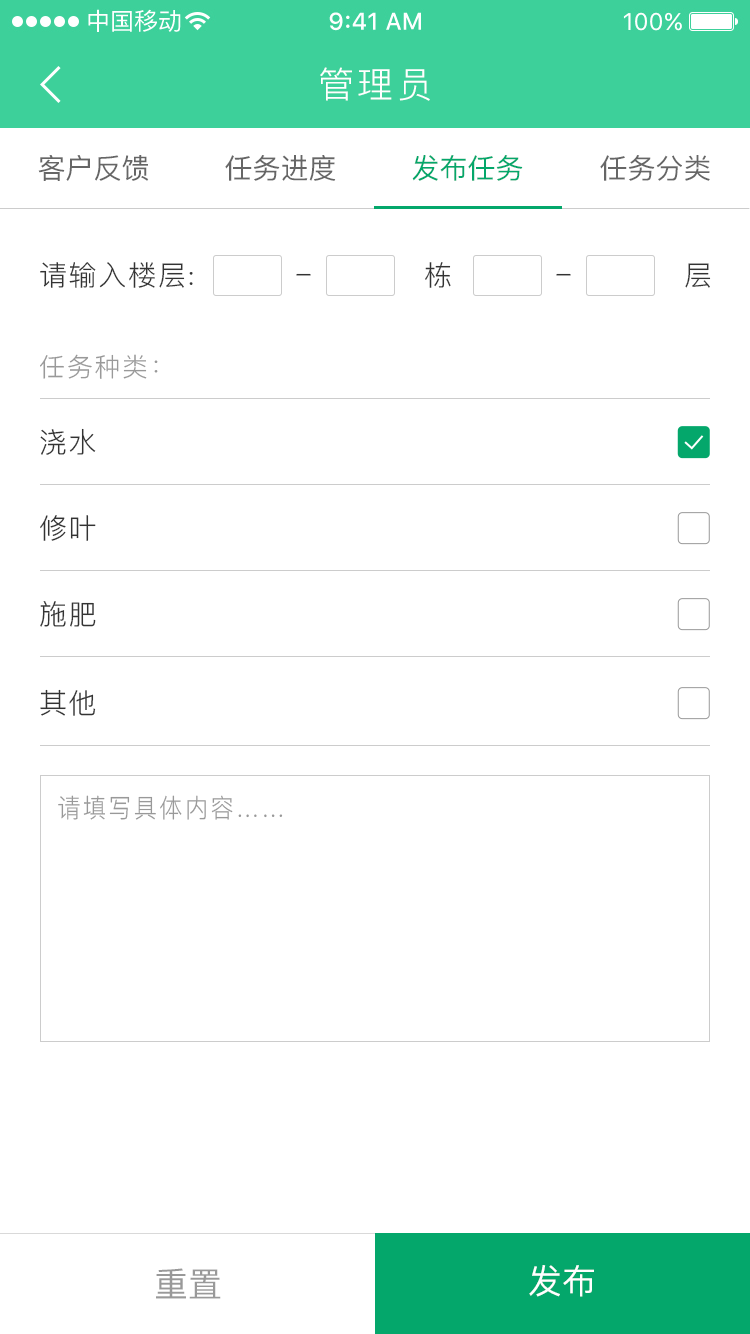
<style>
.page{position:relative;width:750px;height:1334px;background:#ffffff}
.page>*{position:absolute;margin:0}
.t1{font:36px "PingFang-SC-Regular";letter-spacing:0.1em;color:#ffffff}
.t2{font:28px "PingFang-SC-Medium";color:#666666}
.t3{font:28px "PingFang-SC-Medium";color:#04a76b}
.t4{font:28px "PingFang-SC-Regular";letter-spacing:0.06em;color:#333333}
.t5{font:26px "PingFang-SC-Regular";letter-spacing:0.06em;color:#999999}
.t6{font:26px "PingFang-SC-Regular";letter-spacing:0.1em;color:#999999;scale:0.89 1}
.t7{font:34px "PingFang-SC-Medium";color:#ffffff}
.t8{font:34px "PingFang-SC-Medium";color:#999999}
</style>
<div class="page">
<p class="t1" style="left:320px;top:67px;width:110px;height:34px">管理员</p>
<p class="t2" style="left:38px;top:155px;width:111px;height:26px">客户反馈</p>
<p class="t2" style="left:225px;top:155px;width:111px;height:26px">任务进度</p>
<p class="t3" style="left:412px;top:155px;width:111px;height:26px">发布任务</p>
<p class="t2" style="left:600px;top:155px;width:110px;height:26px">任务分类</p>
<p class="t4" style="left:40px;top:262px;width:153px;height:26px">请输入楼层:</p>
<p class="t4" style="left:425px;top:262px;width:26px;height:26px">栋</p>
<p class="t4" style="left:685px;top:263px;width:26px;height:25px">层</p>
<p class="t4" style="left:296px;top:273px;width:15px;height:3px">-</p>
<p class="t4" style="left:556px;top:273px;width:15px;height:3px">-</p>
<p class="t5" style="left:40px;top:354px;width:118px;height:25px">任务种类：</p>
<p class="t4" style="left:40px;top:428px;width:56px;height:27px">浇水</p>
<p class="t4" style="left:40px;top:515px;width:56px;height:26px">修叶</p>
<p class="t4" style="left:40px;top:601px;width:56px;height:26px">施肥</p>
<p class="t4" style="left:40px;top:689px;width:56px;height:27px">其他</p>
<p class="t6" style="left:58px;top:795px;width:225px;height:25px">请填写具体内容……</p>
<p class="t7" style="left:529px;top:1265px;width:65px;height:32px">发布</p>
<p class="t8" style="left:156px;top:1268px;width:65px;height:31px">重置</p>
</div>
